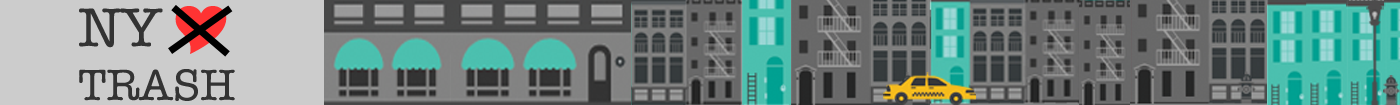
<style>
.page{position:relative;width:1400px;height:105px;background:#cccccc}
.page>*{position:absolute;margin:0}
.t1{font:44.8px "AmericanTypewriter";color:#333333}
.t2{font:56px "AmericanTypewriter";color:#333333}
</style>
<div class="page">
<p class="t1" style="left:79px;top:8px;width:156px;height:93px"><span class="t2">NY <br></span>TRASH</p>
</div>
